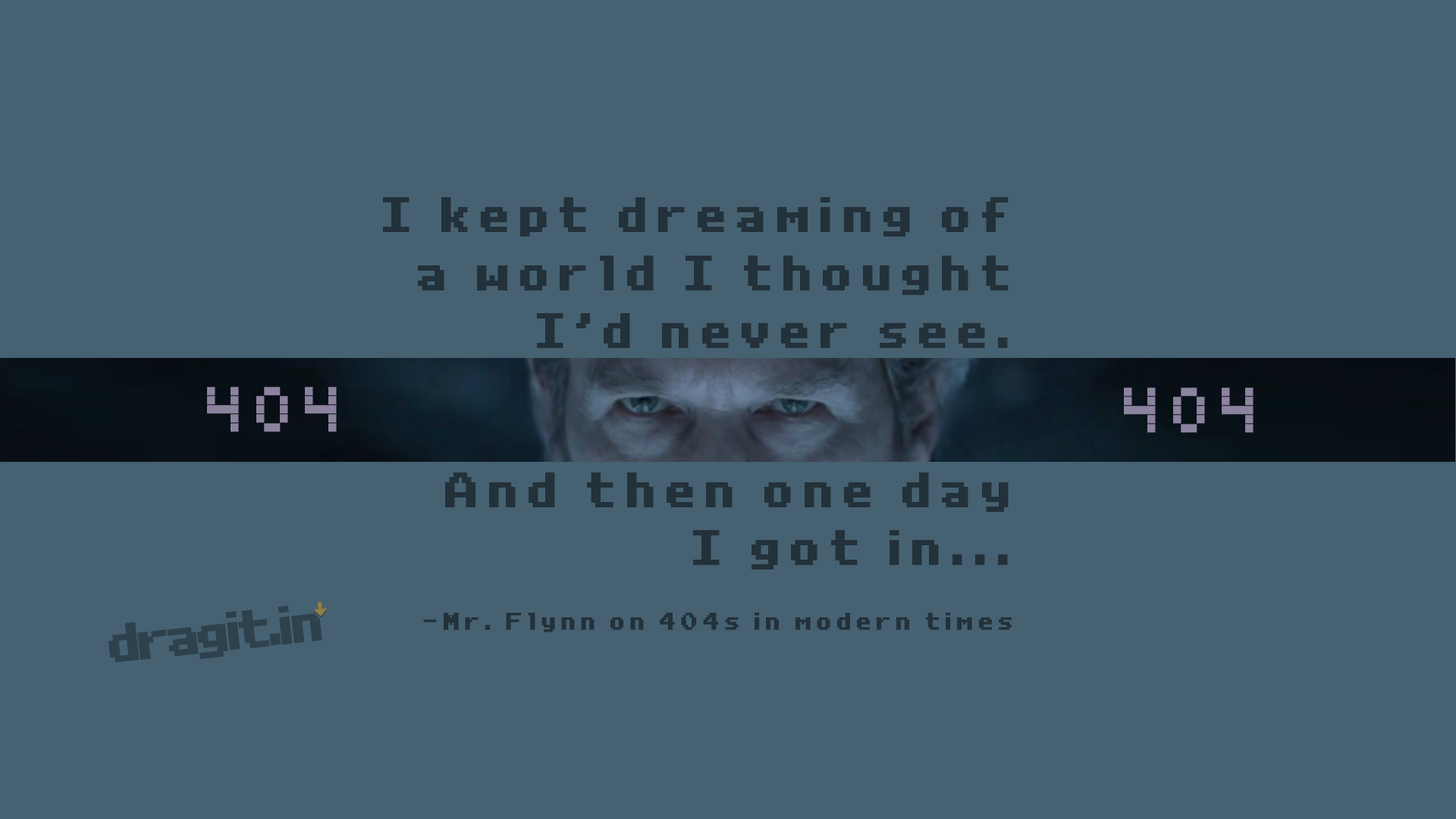
<style>
.page{position:relative;width:1456px;height:819px;background:#466272}
.page>*{position:absolute;margin:0}
.t1{font:48.2px "RetroVilleNC";letter-spacing:0.13em;color:#23313a;font-weight:bold;scale:0.86 1}
.t2{font:24.1px "RetroVilleNC";letter-spacing:0.13em;color:#23313a;font-weight:bold;scale:0.86 1}
.t3{font:72.8px "Pixelate";letter-spacing:0.13em;color:#8c839f;font-weight:bold;scale:0.86 1}
.t4{font:53px "RetroVilleNC";letter-spacing:-0.17em;color:#2e424e;font-weight:bold;scale:0.86 1}
.t5{font:53px "RetroVilleNC";letter-spacing:-0.17em;color:#2e424e;font-weight:bold;scale:0.85 1}
</style>
<div class="page">
<p class="t1" style="left:383px;top:197px;width:629px;height:435px;text-align:right">I kept dreaming of<br>a world I thought<br>I’d never see.<br><br><br>And then one day<br>I got in...<br><br><span class="t2">-Mr. Flynn on 404s in modern times</span></p>
<p class="t3" style="left:207px;top:387px;width:130px;height:45px">404</p>
<p class="t3" style="left:1124px;top:388px;width:130px;height:45px">404</p>
<p class="t4" style="left:108px;top:606px;width:214px;height:57px;rotate:-6deg">dragit.<span class="t5">in</span></p>
</div>
